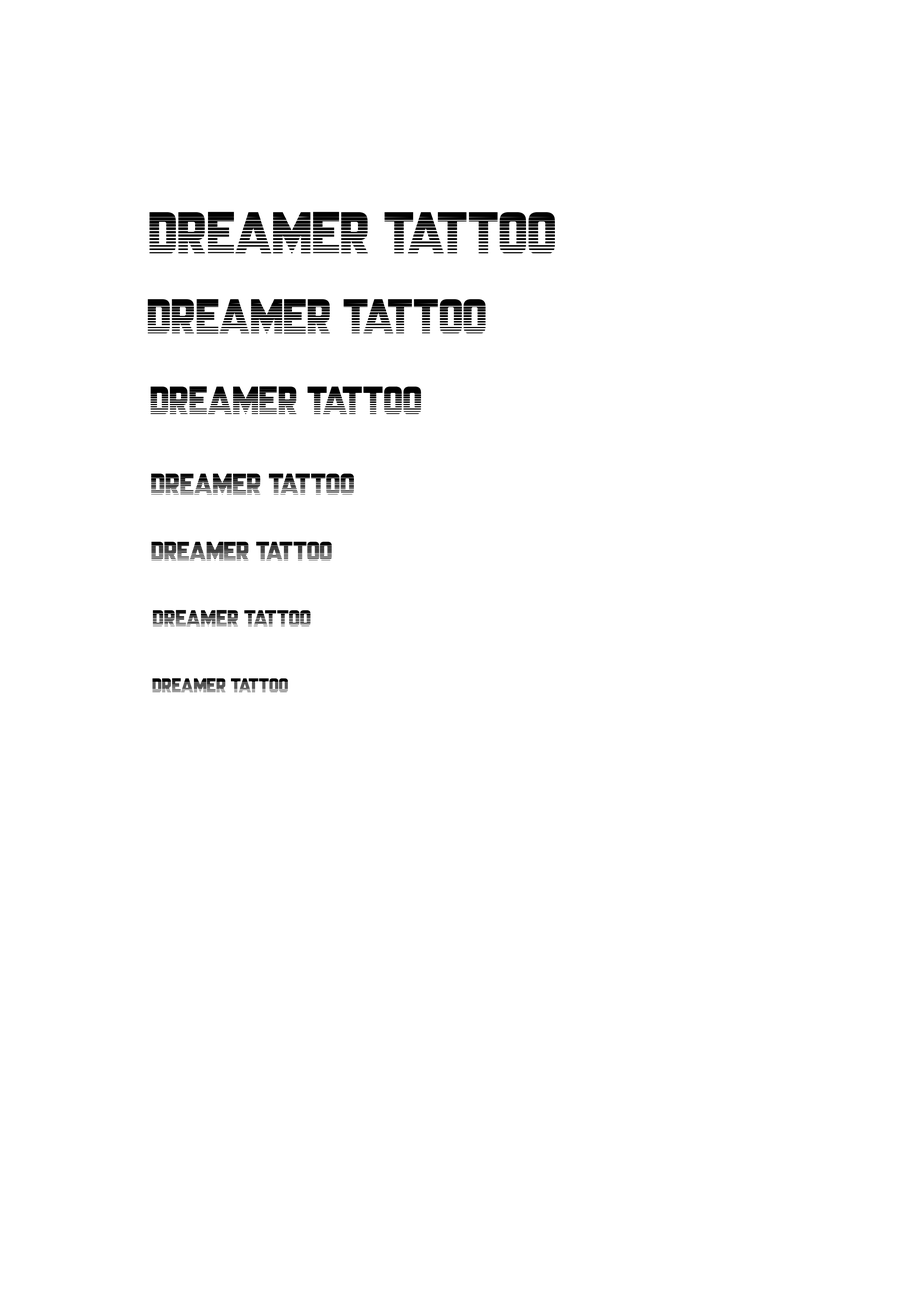
<style>
.page{position:relative;width:918px;height:1299px;background:#ffffff}
.page>*{position:absolute;margin:0}
.t1{font:55.5px "Championship";color:#000000}
.t2{font:46.3px "Championship";color:#000000}
.t3{font:37px "Championship";color:#000000}
.t4{font:27.8px "Championship";color:#000000}
.t5{font:24.7px "Championship";color:#000000}
.t6{font:21.6px "Championship";color:#000000}
.t7{font:18.5px "Championship";color:#000000}
</style>
<div class="page">
<p class="t1" style="left:149px;top:212px;width:406px;height:41px">DREAMER TATTOO</p>
<p class="t2" style="left:148px;top:299px;width:338px;height:35px">DREAMER TATTOO</p>
<p class="t3" style="left:151px;top:386px;width:270px;height:28px">DREAMER TATTOO</p>
<p class="t4" style="left:151px;top:474px;width:203px;height:20px">DREAMER TATTOO</p>
<p class="t5" style="left:151px;top:542px;width:181px;height:18px">DREAMER TATTOO</p>
<p class="t6" style="left:153px;top:610px;width:158px;height:16px">DREAMER TATTOO</p>
<p class="t7" style="left:153px;top:678px;width:135px;height:14px">DREAMER TATTOO</p>
</div>
